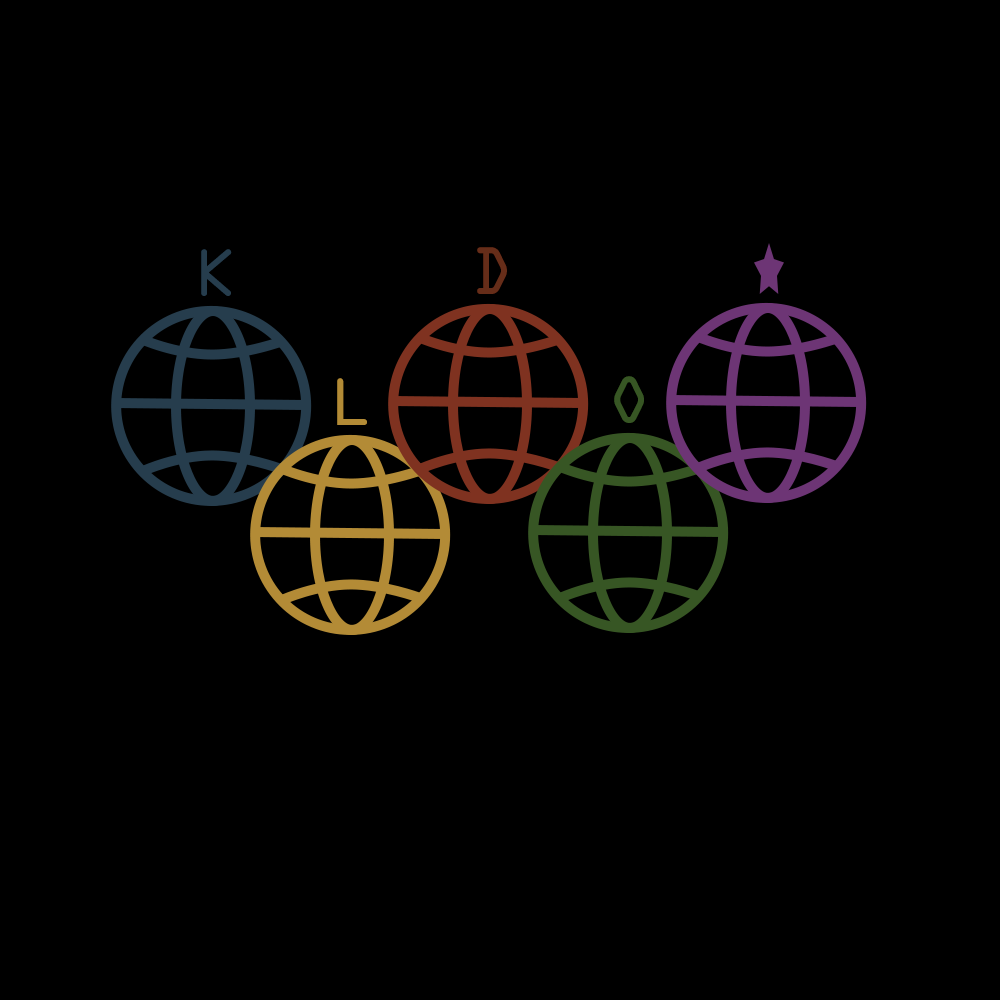
<style>
.page{position:relative;width:1000px;height:1000px;background:#000000}
.page>*{position:absolute;margin:0}
.t1{font:72px "OCR-A";letter-spacing:0.1em;color:#263d4d}
.t2{font:72px "OCR-A";letter-spacing:0.1em;color:#662d19}
.t3{font:72px "OCR-A";letter-spacing:0.1em;color:#375624}
.t4{font:72px "OCR-A";letter-spacing:0.1em;color:#b38b36}
</style>
<div class="page">
<p class="t1" style="left:201px;top:249px;width:31px;height:47px">K</p>
<p class="t2" style="left:477px;top:247px;width:30px;height:47px">D</p>
<p class="t3" style="left:614px;top:376px;width:30px;height:47px">O</p>
<p class="t4" style="left:337px;top:378px;width:30px;height:47px">L</p>
</div>
